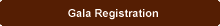
<style>
.page{position:relative;width:220px;height:26px;background:#551e03}
.page>*{position:absolute;margin:0}
.t1{font:11px "Arial-BoldMT";color:#ffffff}
</style>
<div class="page">
<p class="t1" style="left:68px;top:9px;width:90px;height:11px">Gala Registration</p>
</div>
